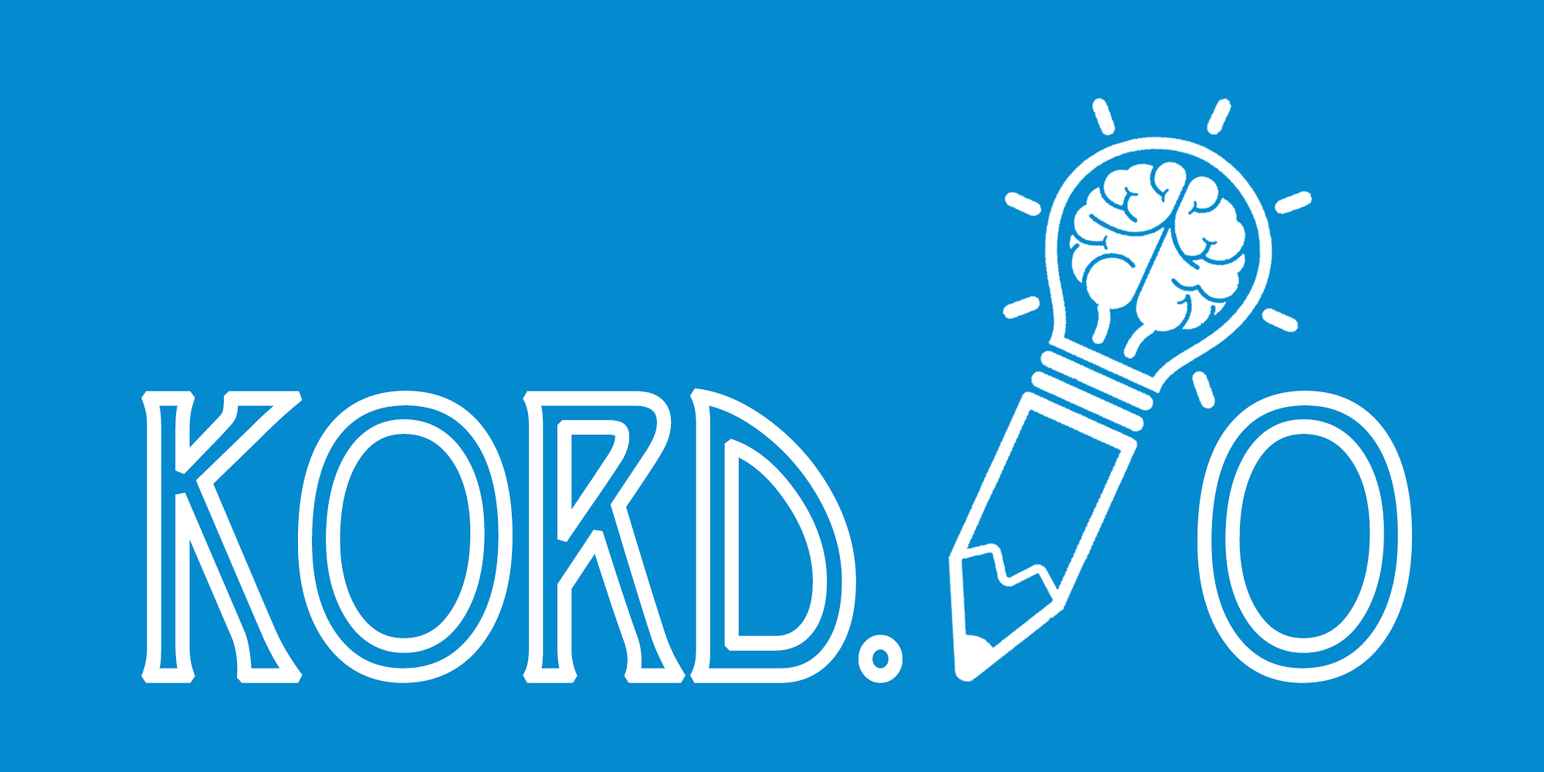
<style>
.page{position:relative;width:1544px;height:772px;background:#038acf}
.page>*{position:absolute;margin:0}
.t1{font:384.5px "Desdemona";letter-spacing:-0.05em;color:#ffffff;font-weight:bold;scale:0.89 1}
</style>
<div class="page">
<p class="t1" style="left:141px;top:388px;width:1271px;height:295px">kord.     o</p>
</div>
